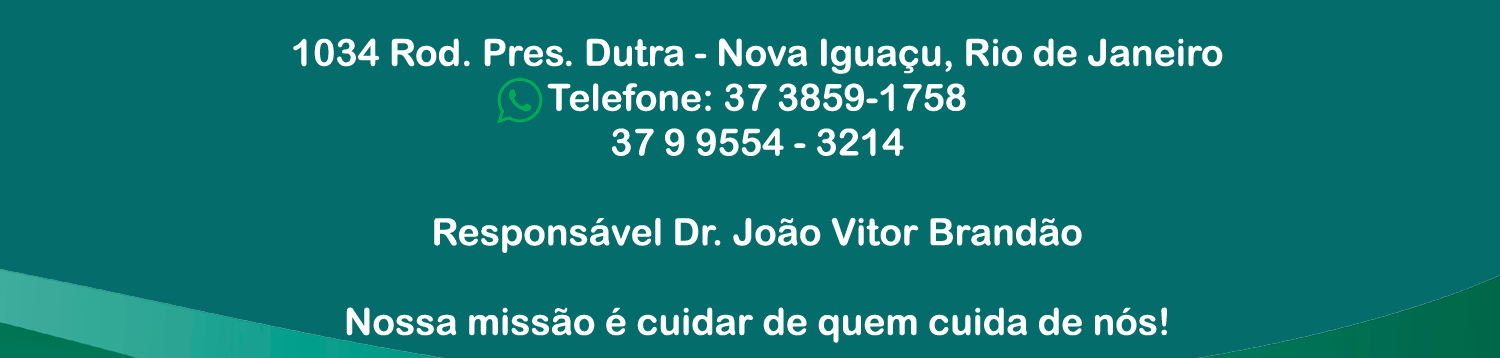
<style>
.page{position:relative;width:1500px;height:358px;background:#056c6c}
.page>*{position:absolute;margin:0}
.t1{font:37.4px "ArialRoundedMTBold";color:#ffffff}
</style>
<div class="page">
<p class="t1" style="left:293px;top:38px;width:930px;height:305px;text-align:center">1034 Rod. Pres. Dutra - Nova Iguaçu, Rio de Janeiro<br>Telefone: 37 3859-1758<br>37 9 9554 - 3214<br><br>Responsável Dr. João Vitor Brandão<br><br>Nossa missão é cuidar de quem cuida de nós!</p>
</div>
